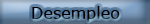
<style>
.page{position:relative;width:150px;height:24px}
.page>*{position:absolute;margin:0}
.t1{font:16px "Verdana";color:#000000}
</style>
<div class="page">
<p class="t1" style="left:32px;top:6px;width:88px;height:16px">Desempleo</p>
</div>
